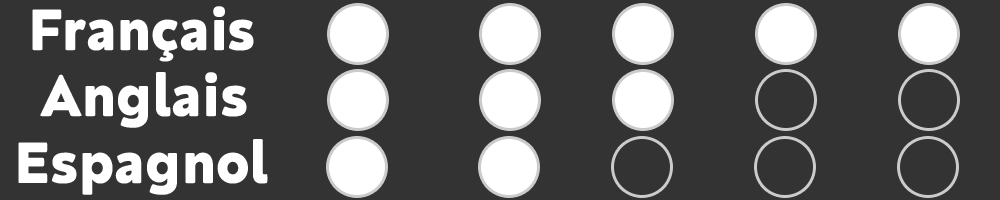
<style>
.page{position:relative;width:1000px;height:200px;background:#333333}
.page>*{position:absolute;margin:0}
.t1{font:60px "Neufreit-ExtraBold";color:#ffffff}
</style>
<div class="page">
<p class="t1" style="left:32px;top:6px;width:222px;height:56px">Français</p>
<p class="t1" style="left:40px;top:72px;width:207px;height:56px">Anglais</p>
<p class="t1" style="left:18px;top:139px;width:250px;height:56px">Espagnol</p>
</div>
